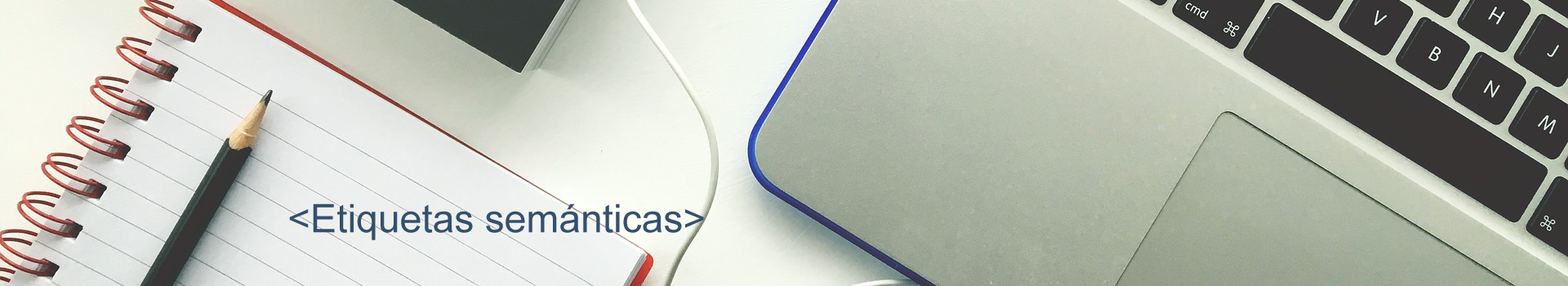
<style>
.page{position:relative;width:1568px;height:286px}
.page>*{position:absolute;margin:0}
.t1{font:39.2px "ArialMT";color:#33506e}
</style>
<div class="page">
<p class="t1" style="left:289px;top:203px;width:415px;height:37px">&lt;Etiquetas semánticas&gt;</p>
</div>
